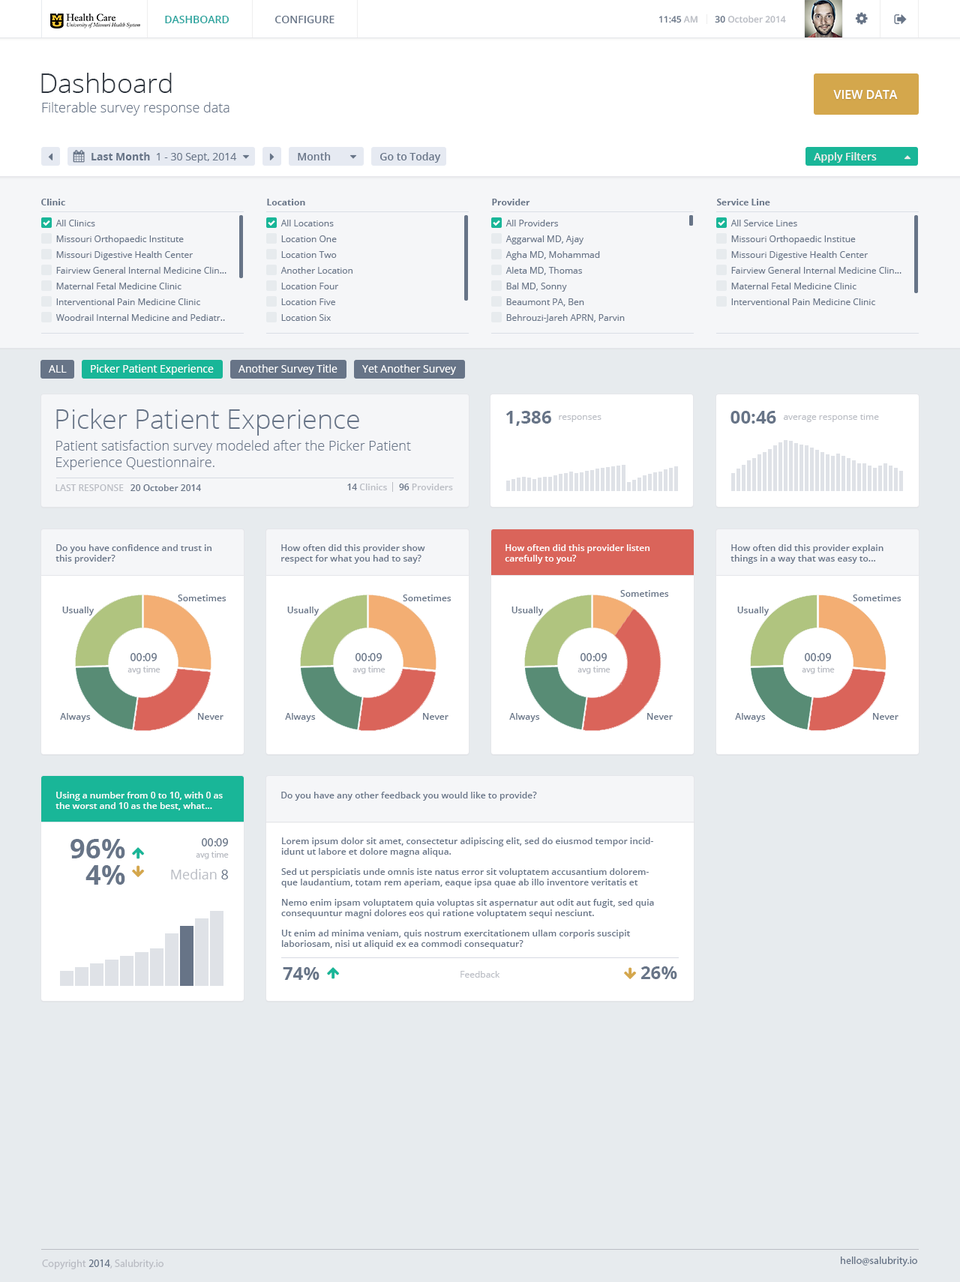
<style>
.page{position:relative;width:960px;height:1282px;background:#e7ebee}
.page>*{position:absolute;margin:0}
.t1{font:10.5px "OpenSans-Semibold";color:#27a49e;text-transform:uppercase}
.t2{font:10.5px "OpenSans-Semibold";color:#677487;text-transform:uppercase}
.t3{font:9px "OpenSans-Semibold";color:#677487}
.t4{font:9px "OpenSans-Semibold";color:#babdc4}
.t5{font:27px "OpenSans-Light";color:#303740}
.t6{font:13.5px "OpenSans-Light";color:#677487}
.t7{font:12px "OpenSans-Semibold";color:#ffffff;text-transform:uppercase}
.t8{font:10.5px "OpenSans";color:#677487}
.t9{font:10.5px "OpenSans-Bold";color:#677487}
.t10{font:10.5px "OpenSans-Semibold";color:#677487}
.t11{font:10.5px "OpenSans-Semibold";color:#eeeeee}
.t12{font:9px "OpenSans-Bold";color:#677487}
.t13{font:9px "OpenSans";color:#677487}
.t14{font:10.5px "OpenSans";color:#ffffff}
.t15{font:27px "OpenSans-Light";color:#677487}
.t16{font:18px "OpenSans-Bold";color:#677487}
.t17{font:9px "OpenSans";color:#babdc4}
.t18{font:9px "OpenSans-Semibold";color:#babdc4;text-transform:uppercase}
.t19{font:9px "OpenSans-Semibold";color:#ffffff}
.t20{font:12px "MyriadPro-Regular";color:#677487}
.t21{font:9px "MyriadPro-Regular";color:#babdc4}
.t22{font:27px "OpenSans-Bold";color:#677487}
.t23{font:13.5px "OpenSans";color:#babdc4}
.t24{font:13.5px "OpenSans";color:#677487}
.t25{font:10.5px "MyriadPro-Regular";color:#babdc4}
.t26{font:10.5px "MyriadPro-Regular";color:#677487}
</style>
<div class="page">
<p class="t1" style="left:165px;top:16px;width:64px;height:7px">Dashboard</p>
<p class="t2" style="left:275px;top:16px;width:59px;height:7px">Configure</p>
<p class="t3" style="left:658px;top:16px;width:40px;height:7px">11:45<span class="t4"> AM</span></p>
<p class="t4" style="left:715px;top:15px;width:71px;height:8px"><span class="t3">30</span> October 2014</p>
<p class="t5" style="left:41px;top:73px;width:131px;height:20px">Dashboard</p>
<p class="t6" style="left:42px;top:102px;width:188px;height:14px">Filterable survey response data</p>
<p class="t7" style="left:833px;top:90px;width:65px;height:9px">View Data</p>
<p class="t8" style="left:92px;top:152px;width:145px;height:11px"><span class="t9">Last Month</span>  1 - 30 Sept, 2014</p>
<p class="t10" style="left:298px;top:152px;width:33px;height:8px">Month</p>
<p class="t10" style="left:380px;top:152px;width:61px;height:11px">Go to Today</p>
<p class="t11" style="left:814px;top:152px;width:63px;height:11px">Apply Filters</p>
<p class="t12" style="left:41px;top:199px;width:24px;height:7px">Clinic</p>
<p class="t12" style="left:267px;top:199px;width:38px;height:7px">Location</p>
<p class="t12" style="left:492px;top:199px;width:38px;height:7px">Provider</p>
<p class="t12" style="left:717px;top:199px;width:53px;height:7px">Service Line</p>
<p class="t13" style="left:56px;top:220px;width:39px;height:6px">All Clinics</p>
<p class="t13" style="left:280px;top:220px;width:54px;height:6px">All Locations</p>
<p class="t13" style="left:506px;top:220px;width:52px;height:6px">All Providers</p>
<p class="t13" style="left:730px;top:220px;width:67px;height:6px">All Service Lines</p>
<p class="t13" style="left:56px;top:236px;width:128px;height:8px">Missouri Orthopaedic Institute</p>
<p class="t13" style="left:281px;top:236px;width:56px;height:6px">Location One</p>
<p class="t13" style="left:506px;top:236px;width:78px;height:8px">Aggarwal MD, Ajay</p>
<p class="t13" style="left:731px;top:236px;width:125px;height:8px">Missouri Orthopaedic Institue</p>
<p class="t13" style="left:56px;top:251px;width:138px;height:9px">Missouri Digestive Health Center</p>
<p class="t13" style="left:281px;top:251px;width:56px;height:7px">Location Two</p>
<p class="t13" style="left:506px;top:251px;width:94px;height:9px">Agha MD, Mohammad</p>
<p class="t13" style="left:731px;top:251px;width:137px;height:9px">Missouri Digestive Health Center</p>
<p class="t13" style="left:56px;top:267px;width:170px;height:7px">Fairview General Internal Medicine Clin...</p>
<p class="t13" style="left:280px;top:267px;width:72px;height:7px">Another Location</p>
<p class="t13" style="left:506px;top:267px;width:76px;height:8px">Aleta MD, Thomas</p>
<p class="t13" style="left:731px;top:267px;width:171px;height:7px">Fairview General Internal Medicine Clin...</p>
<p class="t13" style="left:56px;top:283px;width:126px;height:7px">Maternal Fetal Medicine Clinic</p>
<p class="t13" style="left:281px;top:283px;width:58px;height:7px">Location Four</p>
<p class="t13" style="left:506px;top:283px;width:61px;height:9px">Bal MD, Sonny</p>
<p class="t13" style="left:731px;top:283px;width:125px;height:7px">Maternal Fetal Medicine Clinic</p>
<p class="t13" style="left:56px;top:298px;width:144px;height:7px">Interventional Pain Medicine Clinic</p>
<p class="t13" style="left:281px;top:298px;width:54px;height:7px">Location Five</p>
<p class="t13" style="left:506px;top:298px;width:78px;height:9px">Beaumont PA, Ben</p>
<p class="t13" style="left:731px;top:298px;width:144px;height:7px">Interventional Pain Medicine Clinic</p>
<p class="t13" style="left:56px;top:314px;width:169px;height:7px">Woodrail Internal Medicine and Pediatr..</p>
<p class="t13" style="left:281px;top:314px;width:50px;height:7px">Location Six</p>
<p class="t13" style="left:506px;top:314px;width:119px;height:8px">Behrouzi-Jareh APRN, Parvin</p>
<p class="t14" style="left:49px;top:365px;width:18px;height:8px">ALL</p>
<p class="t14" style="left:91px;top:364px;width:123px;height:11px">Picker Patient Experience</p>
<p class="t14" style="left:238px;top:364px;width:100px;height:11px">Another Survey Title</p>
<p class="t14" style="left:362px;top:364px;width:94px;height:11px">Yet Another Survey</p>
<p class="t15" style="left:56px;top:409px;width:303px;height:27px">Picker Patient Experience</p>
<p class="t16" style="left:506px;top:411px;width:45px;height:15px">1,386</p>
<p class="t16" style="left:730px;top:411px;width:46px;height:13px">00:46</p>
<p class="t17" style="left:783px;top:414px;width:96px;height:8px">average response time</p>
<p class="t17" style="left:559px;top:416px;width:43px;height:6px">responses</p>
<p class="t6" style="left:56px;top:440px;width:355px;height:30px">Patient satisfaction survey modeled after the Picker Patient <br>Experience Questionnaire.</p>
<p class="t18" style="left:56px;top:484px;width:68px;height:7px">Last Response</p>
<p class="t3" style="left:130px;top:484px;width:71px;height:7px">20 October 2014</p>
<p class="t4" style="left:347px;top:484px;width:106px;height:6px"><span class="t3">14 </span>Clinics     <span class="t3">96</span> Providers</p>
<p class="t3" style="left:56px;top:544px;width:156px;height:20px">Do you have confidence and trust in this provider?</p>
<p class="t3" style="left:281px;top:544px;width:144px;height:20px">How often did this provider show respect for what you had to say?</p>
<p class="t19" style="left:505px;top:544px;width:145px;height:20px">How often did this provider listen <br>carefully to you?</p>
<p class="t3" style="left:730px;top:544px;width:154px;height:20px">How often did this provider explain things in a way that was easy to...</p>
<p class="t3" style="left:620px;top:590px;width:49px;height:7px">Sometimes</p>
<p class="t3" style="left:178px;top:595px;width:48px;height:7px">Sometimes</p>
<p class="t3" style="left:403px;top:595px;width:49px;height:7px">Sometimes</p>
<p class="t3" style="left:853px;top:595px;width:49px;height:7px">Sometimes</p>
<p class="t3" style="left:62px;top:607px;width:32px;height:9px">Usually</p>
<p class="t3" style="left:287px;top:607px;width:33px;height:9px">Usually</p>
<p class="t3" style="left:512px;top:607px;width:32px;height:9px">Usually</p>
<p class="t3" style="left:737px;top:607px;width:33px;height:9px">Usually</p>
<p class="t20" style="left:130px;top:653px;width:27px;height:9px">00:09</p>
<p class="t20" style="left:356px;top:653px;width:26px;height:9px">00:09</p>
<p class="t20" style="left:580px;top:653px;width:27px;height:9px">00:09</p>
<p class="t20" style="left:805px;top:653px;width:26px;height:9px">00:09</p>
<p class="t21" style="left:128px;top:666px;width:32px;height:8px">avg time</p>
<p class="t21" style="left:352px;top:666px;width:34px;height:8px">avg time</p>
<p class="t21" style="left:578px;top:666px;width:32px;height:8px">avg time</p>
<p class="t21" style="left:802px;top:666px;width:33px;height:8px">avg time</p>
<p class="t3" style="left:60px;top:713px;width:31px;height:9px">Always</p>
<p class="t3" style="left:198px;top:713px;width:26px;height:7px">Never</p>
<p class="t3" style="left:285px;top:713px;width:31px;height:9px">Always</p>
<p class="t3" style="left:423px;top:713px;width:25px;height:7px">Never</p>
<p class="t3" style="left:509px;top:713px;width:31px;height:9px">Always</p>
<p class="t3" style="left:647px;top:713px;width:26px;height:7px">Never</p>
<p class="t3" style="left:735px;top:713px;width:31px;height:9px">Always</p>
<p class="t3" style="left:873px;top:713px;width:25px;height:7px">Never</p>
<p class="t19" style="left:56px;top:792px;width:167px;height:19px">Using a number from 0 to 10, with 0 as the worst and 10 as the best, what...</p>
<p class="t3" style="left:281px;top:792px;width:256px;height:9px">Do you have any other feedback you would like to provide?</p>
<p class="t22" style="left:70px;top:839px;width:55px;height:20px">96%</p>
<p class="t20" style="left:202px;top:838px;width:26px;height:9px">00:09</p>
<p class="t3" style="left:281px;top:838px;width:372px;height:19px">Lorem ipsum dolor sit amet, consectetur adipiscing elit, sed do eiusmod tempor incididunt ut labore et dolore magna aliqua.</p>
<p class="t21" style="left:196px;top:851px;width:33px;height:9px">avg time</p>
<p class="t22" style="left:86px;top:866px;width:39px;height:19px">4%</p>
<p class="t23" style="left:171px;top:869px;width:57px;height:11px">Median <span class="t24">8</span></p>
<p class="t3" style="left:281px;top:868px;width:368px;height:20px">Sed ut perspiciatis unde omnis iste natus error sit voluptatem accusantium doloremque laudantium, totam rem aperiam, eaque ipsa quae ab illo inventore veritatis et quasi architecto beatae vitae dicta sunt explicabo.</p>
<p class="t3" style="left:281px;top:899px;width:373px;height:20px">Nemo enim ipsam voluptatem quia voluptas sit aspernatur aut odit aut fugit, sed quia consequuntur magni dolores eos qui ratione voluptatem sequi nesciunt.</p>
<p class="t3" style="left:281px;top:930px;width:349px;height:20px">Ut enim ad minima veniam, quis nostrum exercitationem ullam corporis suscipit laboriosam, nisi ut aliquid ex ea commodi consequatur?</p>
<p class="t16" style="left:283px;top:968px;width:37px;height:12px">74%</p>
<p class="t17" style="left:460px;top:971px;width:40px;height:7px">Feedback</p>
<p class="t16" style="left:641px;top:967px;width:36px;height:13px">26%</p>
<p class="t25" style="left:42px;top:1260px;width:122px;height:10px">Copyright <span class="t26">2014</span>, Salubrity.io</p>
<p class="t26" style="left:841px;top:1257px;width:76px;height:11px">hello@salubrity.io</p>
</div>
